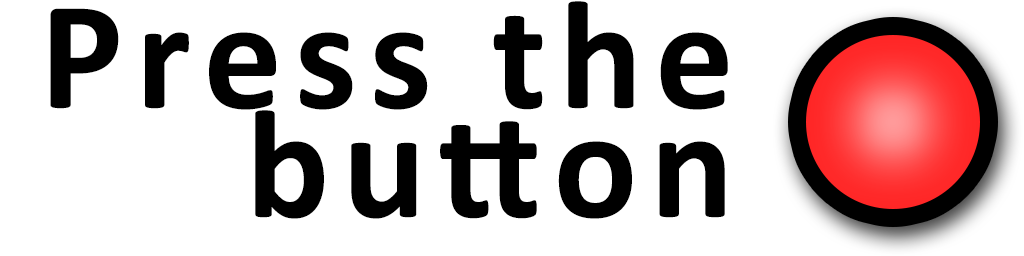
<style>
.page{position:relative;width:1024px;height:256px;background:#ffffff}
.page>*{position:absolute;margin:0}
.t1{font:268px/109px "Calibri-Bold";letter-spacing:0.08em;color:#000000}
</style>
<div class="page">
<p class="t1" style="left:50px;top:1px;width:678px;height:218px;text-align:right">Press the<br>button</p>
</div>
